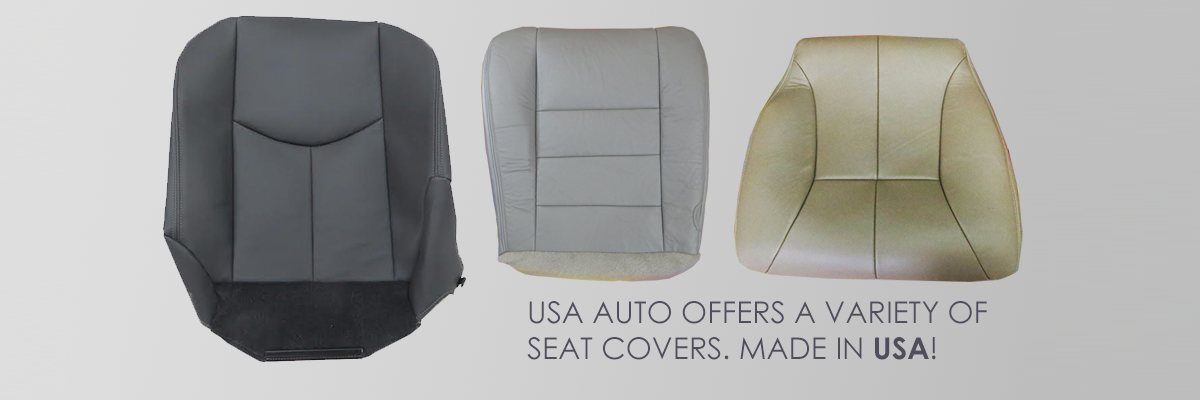
<style>
.page{position:relative;width:1200px;height:400px}
.page>*{position:absolute;margin:0}
.t1{font:30px "CenturyGothic";color:#504e5c}
.t2{font:30px "CenturyGothic-Bold";color:#504e5c}
</style>
<div class="page">
<p class="t1" style="left:527px;top:301px;width:460px;height:59px">USA AUTO OFFERS A VARIETY OF <br>SEAT COVERS. MADE IN <span class="t2">USA</span>!</p>
</div>
